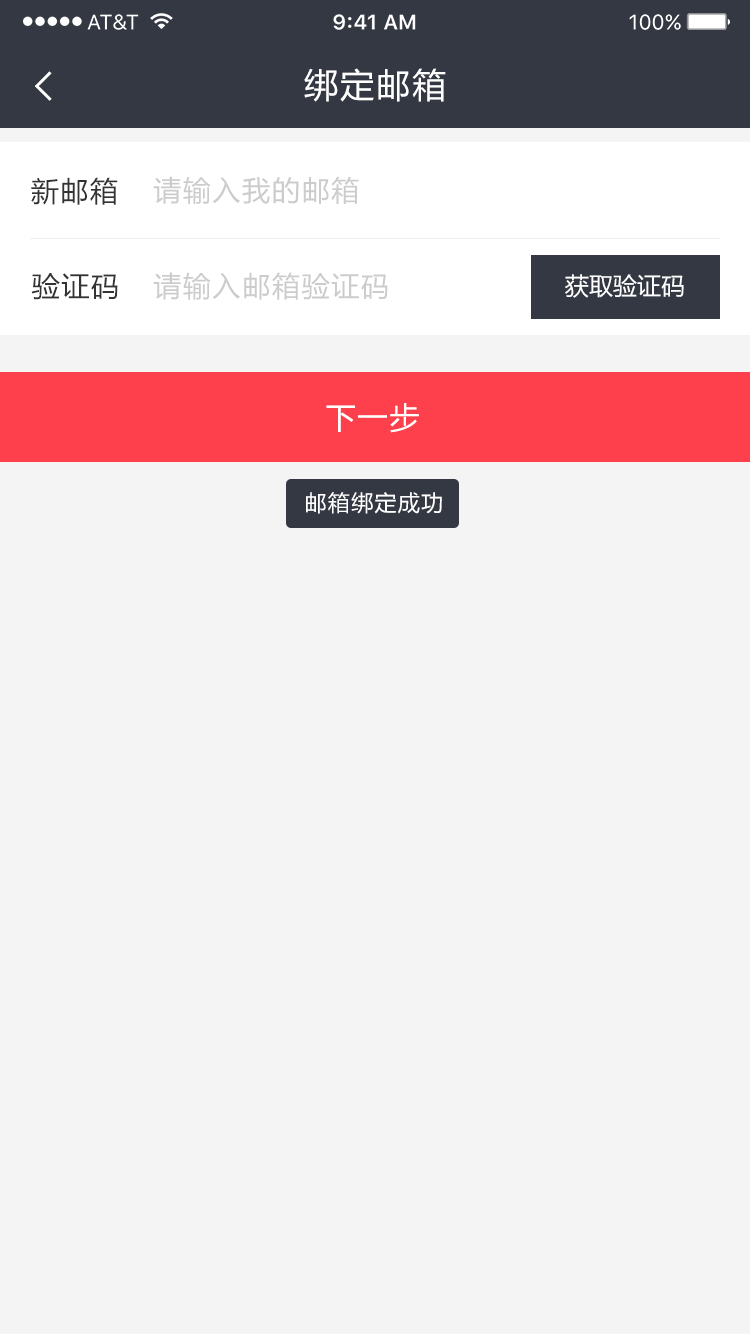
<style>
.page{position:relative;width:750px;height:1334px;background:#f4f4f4}
.page>*{position:absolute;margin:0}
.t1{font:34px "MicrosoftYaHei";letter-spacing:0.06em;color:#ffffff}
.t2{font:28px "MicrosoftYaHei";letter-spacing:0.06em;color:#333333}
.t3{font:28px "MicrosoftYaHei";letter-spacing:0.06em;color:#cccccc}
.t4{font:24px "MicrosoftYaHei";color:#ffffff}
.t5{font:30px "MicrosoftYaHei";letter-spacing:0.06em;color:#ffffff}
.t6{font:22px "MicrosoftYaHei";letter-spacing:0.06em;color:#ffffff}
</style>
<div class="page">
<p class="t1" style="left:304px;top:68px;width:142px;height:34px">绑定邮箱</p>
<p class="t2" style="left:31px;top:177px;width:87px;height:28px">新邮箱</p>
<p class="t3" style="left:153px;top:176px;width:206px;height:28px">请输入我的邮箱</p>
<p class="t2" style="left:31px;top:273px;width:87px;height:27px">验证码</p>
<p class="t3" style="left:153px;top:272px;width:235px;height:28px">请输入邮箱验证码</p>
<p class="t4" style="left:565px;top:274px;width:119px;height:24px">获取验证码</p>
<p class="t5" style="left:326px;top:403px;width:93px;height:30px">下一步</p>
<p class="t6" style="left:306px;top:492px;width:136px;height:22px">邮箱绑定成功</p>
</div>
